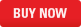
<style>
.page{position:relative;width:81px;height:27px;background:#e61f25}
.page>*{position:absolute;margin:0}
.t1{font:13px "Univers-CondensedBold";color:#fceeee}
</style>
<div class="page">
<p class="t1" style="left:13px;top:8px;width:54px;height:10px">BUY NOW</p>
</div>
